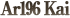
<style>
.page{position:relative;width:70px;height:18px;background:#ffffff}
.page>*{position:absolute;margin:0}
.t1{font:18px "RyuminPro-ExBold";letter-spacing:-0.1em;color:#4a3f32;font-weight:bold;scale:0.9 1}
</style>
<div class="page">
<p class="t1" style="left:0px;top:1px;width:70px;height:15px">Ar196 Kai</p>
</div>
